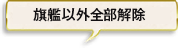
<style>
.page{position:relative;width:178px;height:48px;background:#ffffff}
.page>*{position:absolute;margin:0}
.t1{font:14px "GothicMB101Pr6N-Medium";color:#141113}
</style>
<div class="page">
<p class="t1" style="left:33px;top:7px;width:113px;height:15px">旗艦以外全部解除</p>
</div>
